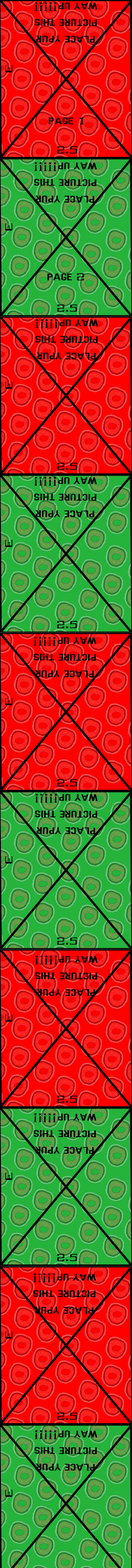
<style>
.page{position:relative;width:132px;height:1568px}
.page>*{position:absolute;margin:0}
.t1{font:13.9px "Dhurjati";color:#000000}
</style>
<div class="page">
<p class="t1" style="left:34px;top:2px;width:63px;height:41px;rotate:-180deg">PLACE YPUR PICTURE THIS WAY UP!!!!!</p>
<p class="t1" style="left:49px;top:117px;width:35px;height:8px">PAGE 1</p>
<p class="t1" style="left:34px;top:162px;width:63px;height:41px;rotate:-180deg">PLACE YPUR PICTURE THIS WAY UP!!!!!</p>
<p class="t1" style="left:47px;top:273px;width:37px;height:8px">PAGE 2</p>
<p class="t1" style="left:35px;top:319px;width:63px;height:41px;rotate:-180deg">PLACE YPUR PICTURE THIS WAY UP!!!!!</p>
<p class="t1" style="left:34px;top:476px;width:63px;height:42px;rotate:-180deg">PLACE YPUR PICTURE THIS WAY UP!!!!!</p>
<p class="t1" style="left:34px;top:636px;width:63px;height:42px;rotate:-180deg">PLACE YPUR PICTURE THIS WAY UP!!!!!</p>
<p class="t1" style="left:35px;top:793px;width:63px;height:42px;rotate:-180deg">PLACE YPUR PICTURE THIS WAY UP!!!!!</p>
<p class="t1" style="left:35px;top:955px;width:63px;height:41px;rotate:-180deg">PLACE YPUR PICTURE THIS WAY UP!!!!!</p>
<p class="t1" style="left:34px;top:1113px;width:63px;height:41px;rotate:-180deg">PLACE YPUR PICTURE THIS WAY UP!!!!!</p>
<p class="t1" style="left:33px;top:1273px;width:63px;height:41px;rotate:-180deg">PLACE YPUR PICTURE THIS WAY UP!!!!!</p>
<p class="t1" style="left:34px;top:1430px;width:63px;height:41px;rotate:-180deg">PLACE YPUR PICTURE THIS WAY UP!!!!!</p>
</div>
